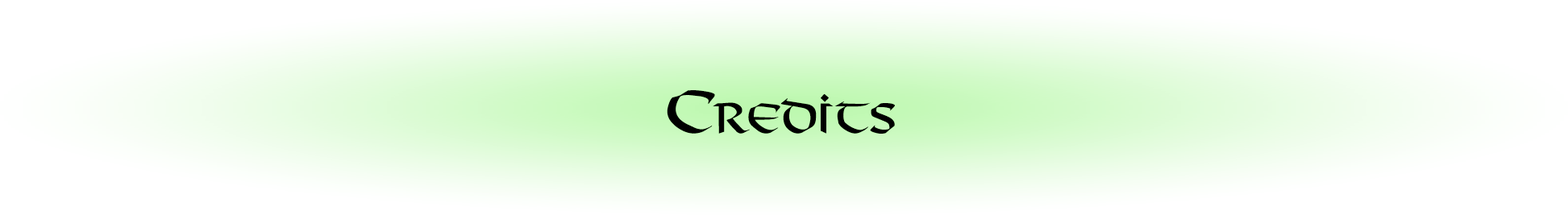
<style>
.page{position:relative;width:1568px;height:215px;background:#ffffff}
.page>*{position:absolute;margin:0}
.t1{font:58px "Viking-Medium";color:#000000;font-variant:small-caps}
</style>
<div class="page">
<p class="t1" style="left:667px;top:90px;width:228px;height:44px">Credits</p>
</div>
